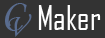
<style>
.page{position:relative;width:105px;height:38px;background:#333333}
.page>*{position:absolute;margin:0}
.t1{font:41.7px "MonotypeCorsiva";color:#596c8f}
.t2{font:33.3px "AgencyFB-Reg";color:#ffffff}
.t3{font:33.3px "MonotypeCorsiva";color:#596c8f}
</style>
<div class="page">
<p class="t1" style="left:5px;top:3px;width:22px;height:28px">C</p>
<p class="t2" style="left:38px;top:5px;width:63px;height:25px">Maker</p>
<p class="t3" style="left:8px;top:14px;width:24px;height:23px">V</p>
</div>
